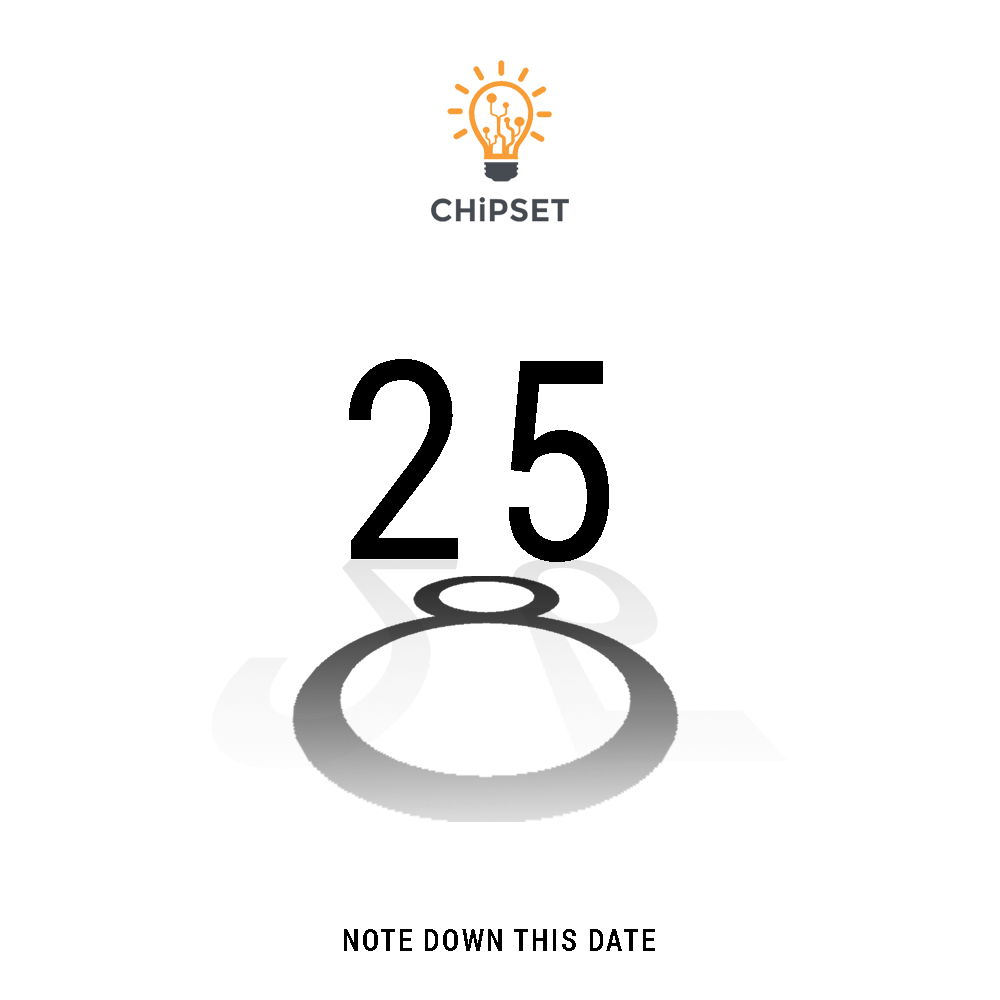
<style>
.page{position:relative;width:1000px;height:1000px;background:#ffffff}
.page>*{position:absolute;margin:0}
.t1{font:277.8px "Roboto-Regular";letter-spacing:0.1em;color:#000000;text-transform:uppercase;scale:0.83 1}
.t2{font:29.9px "Roboto-Bold";letter-spacing:0.1em;color:#000000;text-transform:uppercase;scale:0.83 1}
</style>
<div class="page">
<p class="t1" style="left:349px;top:359px;width:260px;height:203px">25</p>
<p class="t2" style="left:344px;top:929px;width:311px;height:22px">note down this date</p>
</div>
